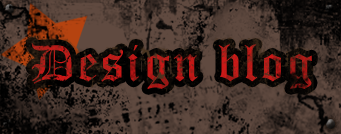
<style>
.page{position:relative;width:341px;height:134px}
.page>*{position:absolute;margin:0}
.t1{font:53.3px "OldEnglishTextMT";letter-spacing:0.05em}
</style>
<div class="page">
<p class="t1" style="left:31px;top:43px;width:281px;height:46px">Design blog</p>
</div>
